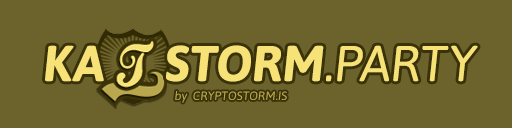
<style>
.page{position:relative;width:512px;height:128px;background:#6c622c}
.page>*{position:absolute;margin:0}
.t1{font:50px "Asap-BoldItalic";color:#f7e277}
.t2{font:50px "Asap-Italic";color:#f7e277}
.t3{font:12px "Asap-Italic";color:#b9a74e}
</style>
<div class="page">
<p class="t1" style="left:45px;top:45px;width:433px;height:37px">KA     STORM<span class="t2">.PARTY</span></p>
<p class="t3" style="left:175px;top:91px;width:112px;height:12px">by  CRYPTOSTORM.IS</p>
</div>
